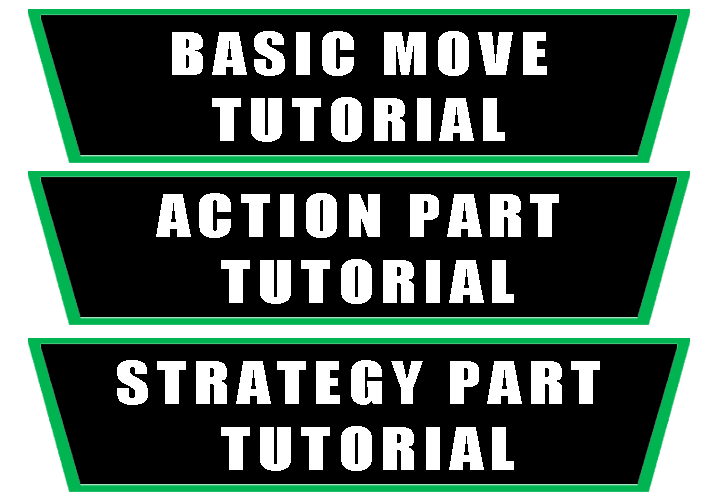
<style>
.page{position:relative;width:718px;height:501px;background:#000000}
.page>*{position:absolute;margin:0}
.t1{font:55.4px "Impact";letter-spacing:0.1em;color:#ffffff;scale:1.2 1}
</style>
<div class="page">
<p class="t1" style="left:172px;top:31px;width:375px;height:111px;text-align:center">BASIC MOVE<br>TUTORIAL</p>
<p class="t1" style="left:156px;top:193px;width:403px;height:111px;text-align:center">ACTION PART<br> TUTORIAL</p>
<p class="t1" style="left:117px;top:360px;width:483px;height:111px;text-align:center">STRATEGY PART<br> TUTORIAL</p>
</div>
